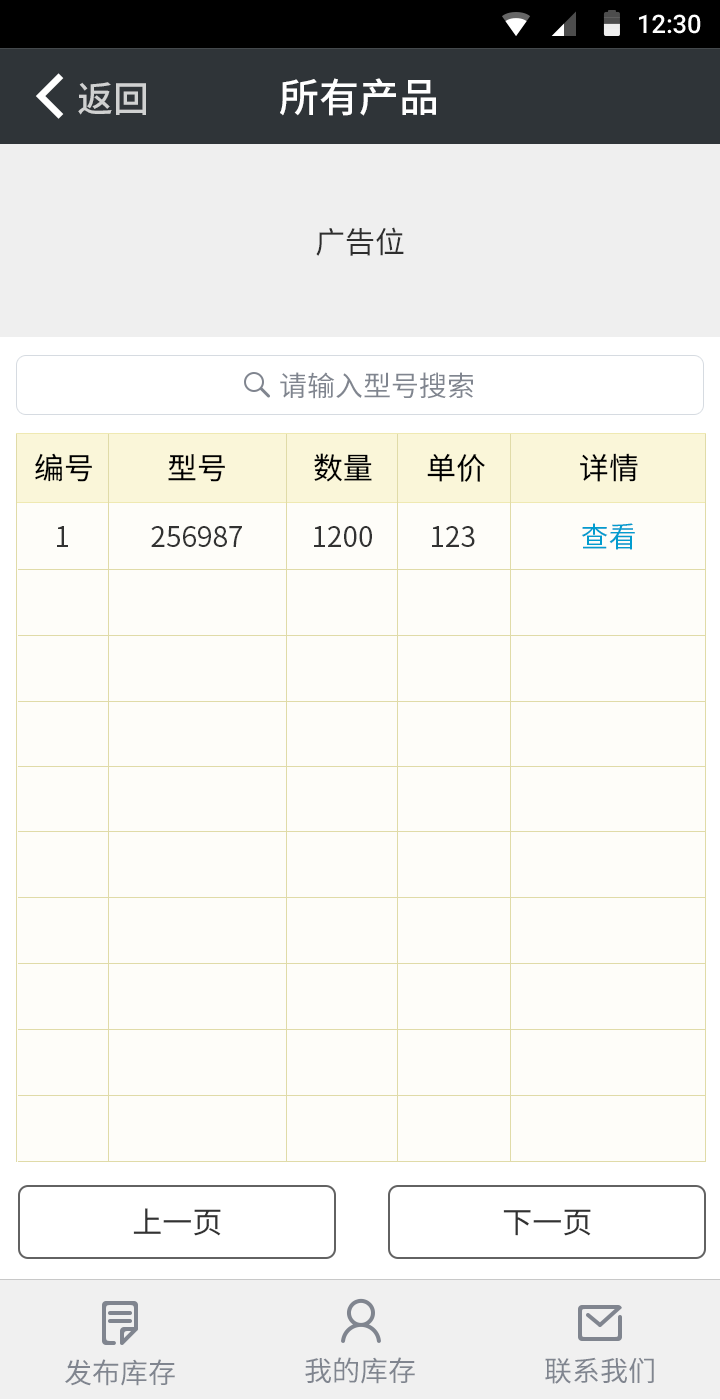
<style>
.page{position:relative;width:720px;height:1400px;background:#fefdf9}
.page>*{position:absolute;margin:0}
.t1{font:25.4px "Roboto-Medium";color:#ffffff}
.t2{font:40px "SourceHanSansCN-Medium";color:#ffffff}
.t3{font:36px "SourceHanSansCN-Medium";color:#d0d1d1}
.t4{font:30px "SourceHanSansCN-Regular";color:#2e2e2e}
.t5{font:28px "SourceHanSansCN-Regular";color:#80858f}
.t6{font:30px "SourceHanSansCN-Regular";color:#000000}
.t7{font:28px "SourceHanSansCN-Regular";color:#323232}
.t8{font:28px "SourceHanSansCN-Regular";color:#029ccf}
.t9{font:30px "SourceHanSansCN-Regular";color:#323232}
</style>
<div class="page">
<p class="t1" style="left:639px;top:14px;width:62px;height:20px">12:30</p>
<p class="t2" style="left:280px;top:78px;width:156px;height:38px">所有产品</p>
<p class="t3" style="left:78px;top:82px;width:68px;height:33px">返回</p>
<p class="t4" style="left:316px;top:227px;width:88px;height:29px">广告位</p>
<p class="t5" style="left:280px;top:372px;width:193px;height:27px">请输入型号搜索</p>
<p class="t6" style="left:35px;top:453px;width:57px;height:29px">编号</p>
<p class="t6" style="left:168px;top:454px;width:57px;height:28px">型号</p>
<p class="t6" style="left:314px;top:453px;width:58px;height:29px">数量</p>
<p class="t6" style="left:427px;top:453px;width:58px;height:29px">单价</p>
<p class="t6" style="left:580px;top:453px;width:58px;height:29px">详情</p>
<p class="t7" style="left:57px;top:526px;width:11px;height:21px">1</p>
<p class="t7" style="left:151px;top:526px;width:91px;height:21px">256987</p>
<p class="t7" style="left:314px;top:526px;width:58px;height:21px">1200</p>
<p class="t7" style="left:432px;top:526px;width:43px;height:21px">123</p>
<p class="t8" style="left:581px;top:523px;width:54px;height:27px">查看</p>
<p class="t9" style="left:133px;top:1208px;width:88px;height:28px">上一页</p>
<p class="t9" style="left:503px;top:1209px;width:88px;height:27px">下一页</p>
<p class="t5" style="left:65px;top:1359px;width:110px;height:27px">发布库存</p>
<p class="t5" style="left:305px;top:1357px;width:110px;height:27px">我的库存</p>
<p class="t5" style="left:545px;top:1357px;width:109px;height:27px">联系我们</p>
</div>
